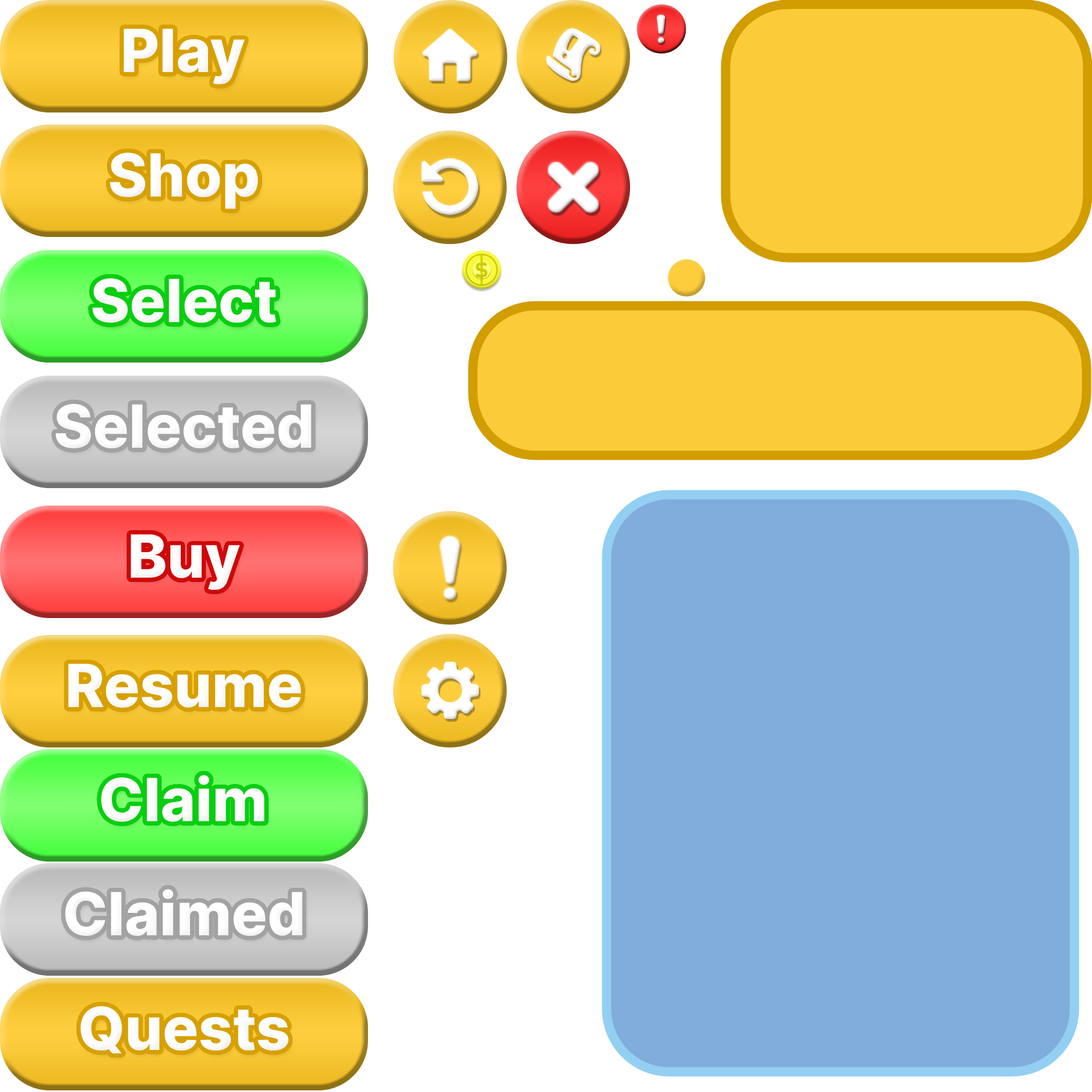
<style>
.page{position:relative;width:1092px;height:1092px;background:#ffffff}
.page>*{position:absolute;margin:0}
.t1{font:59.5px "Inter-ExtraBold";color:#ffffff}
</style>
<div class="page">
<p class="t1" style="left:123px;top:28px;width:122px;height:57px">Play</p>
<p class="t1" style="left:110px;top:152px;width:148px;height:57px">Shop</p>
<p class="t1" style="left:110px;top:152px;width:148px;height:57px">Shop</p>
<p class="t1" style="left:110px;top:152px;width:148px;height:57px">Shop</p>
<p class="t1" style="left:92px;top:278px;width:184px;height:45px">Select</p>
<p class="t1" style="left:92px;top:278px;width:184px;height:45px">Select</p>
<p class="t1" style="left:56px;top:403px;width:255px;height:45px">Selected</p>
<p class="t1" style="left:130px;top:534px;width:110px;height:56px">Buy</p>
<p class="t1" style="left:68px;top:663px;width:233px;height:45px">Resume</p>
<p class="t1" style="left:101px;top:775px;width:163px;height:47px">Claim</p>
<p class="t1" style="left:65px;top:889px;width:237px;height:47px">Claimed</p>
<p class="t1" style="left:80px;top:1006px;width:209px;height:48px">Quests</p>
</div>
